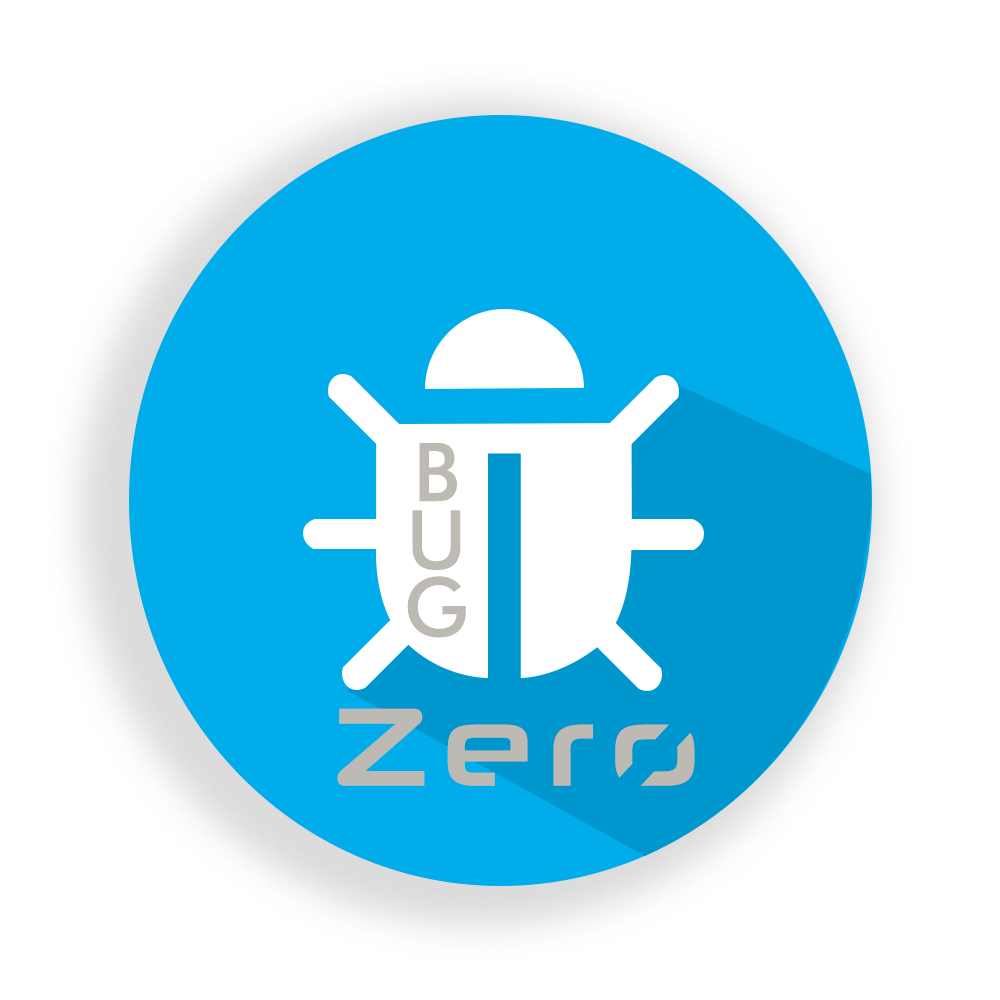
<style>
.page{position:relative;width:1000px;height:1000px;background:#ffffff}
.page>*{position:absolute;margin:0}
.t1{font:139.2px "FuturaBT-Medium";letter-spacing:-0.17em;color:#bcbab2}
.t2{font:192.8px "NeuropoliticalRg-Regular";letter-spacing:0.13em;color:#bcbab2}
</style>
<div class="page">
<p class="t1" style="left:407px;top:443px;width:59px;height:195px">BUG</p>
<p class="t2" style="left:337px;top:708px;width:358px;height:78px">Zero</p>
</div>
